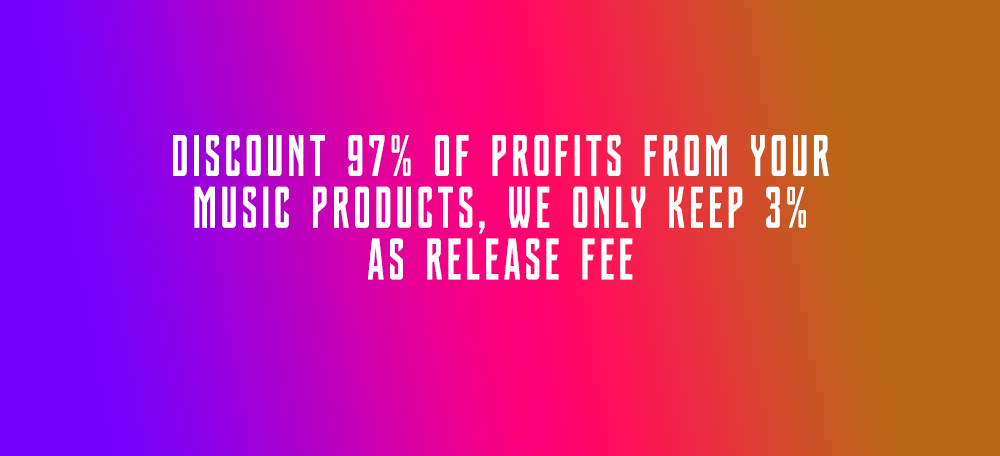
<style>
.page{position:relative;width:1000px;height:456px}
.page>*{position:absolute;margin:0}
.t1{font:58.5px/51.8px "SVN-JusticeLeague";letter-spacing:0.1em;color:#ffffff;scale:0.84 1}
</style>
<div class="page">
<p class="t1" style="left:173px;top:135px;width:656px;height:145px;text-align:center">discount 97% of profits from your music products, we only keep 3% as release fee</p>
</div>
